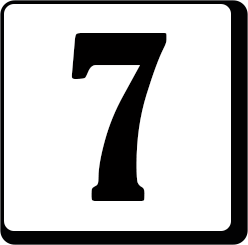
<style>
.page{position:relative;width:248px;height:245px;background:#ffffff}
.page>*{position:absolute;margin:0}
.t1{font:216px "BernardMT-Condensed";color:#010000}
</style>
<div class="page">
<p class="t1" style="left:71px;top:33px;width:96px;height:168px">7</p>
</div>
